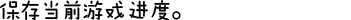
<style>
.page{position:relative;width:351px;height:20px;background:#ffffff}
.page>*{position:absolute;margin:0}
.t1{font:24px "¢è?";color:#000000}
</style>
<div class="page">
<p class="t1" style="left:0px;top:0px;width:181px;height:21px">保存当前游戏进度。</p>
</div>
